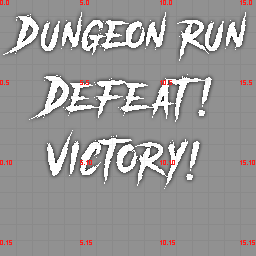
<style>
.page{position:relative;width:256px;height:256px;background:#919191}
.page>*{position:absolute;margin:0}
.t1{font:35px "AnotherDangerDemo";letter-spacing:0.1em;color:#ffffff}
.t2{font:40px "AnotherDangerDemo";letter-spacing:0.1em;color:#ffffff}
.t3{font:44.6px "AnotherDangerDemo";letter-spacing:0.06em;color:#ffffff}
.t4{font:36.1px "AnotherDangerDemo";letter-spacing:0.3em;color:#ffffff}
.t5{font:36.1px "AnotherDangerDemo";letter-spacing:0.2em;color:#ffffff}
.t6{font:36.1px "AnotherDangerDemo";letter-spacing:0.16em;color:#ffffff}
.t7{font:36.1px "AnotherDangerDemo";letter-spacing:0.4em;color:#ffffff}
.t8{font:36px "AnotherDangerDemo";letter-spacing:0.1em;color:#ffffff}
.t9{font:37.5px "AnotherDangerDemo";letter-spacing:0.1em;color:#ffffff}
.t10{font:37.5px "AnotherDangerDemo";letter-spacing:0.2em;color:#ffffff}
.t11{font:40.3px "AnotherDangerDemo";letter-spacing:0.1em;color:#ffffff}
</style>
<div class="page">
<p class="t1" style="left:3px;top:12px;width:243px;height:49px"><span class="t2">d</span>ungeon run</p>
<p class="t3" style="left:29px;top:74px;width:176px;height:48px">d<span class="t4">e</span><span class="t5">f</span><span class="t4">e</span><span class="t6">a</span><span class="t7">t</span></p>
<p class="t8" style="left:198px;top:77px;width:14px;height:39px">!</p>
<p class="t9" style="left:47px;top:130px;width:141px;height:59px">victo<span class="t10">r</span><span class="t11">y</span></p>
<p class="t8" style="left:186px;top:141px;width:14px;height:39px">!</p>
</div>
